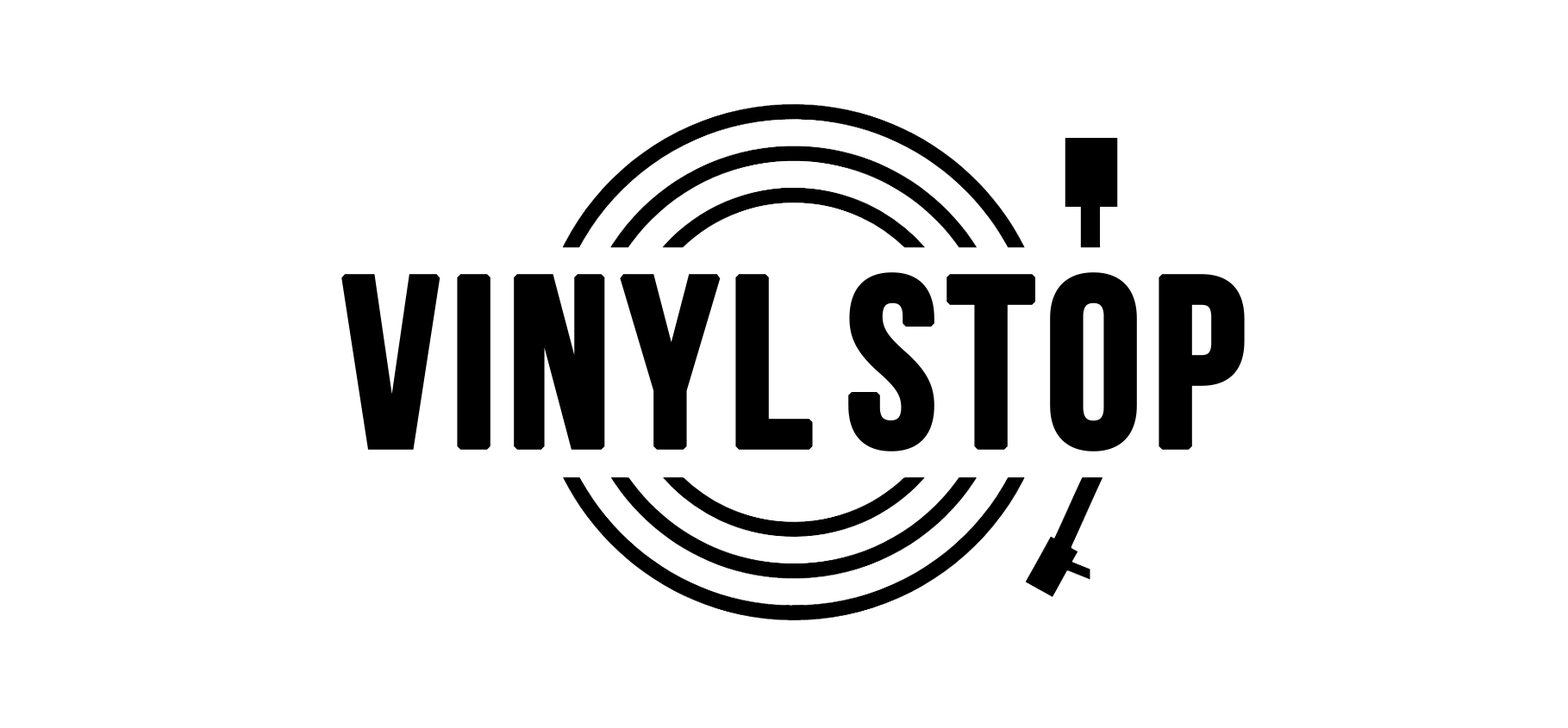
<style>
.page{position:relative;width:1568px;height:728px;background:#ffffff}
.page>*{position:absolute;margin:0}
.t1{font:241.4px "BebasNeue";letter-spacing:0.02em;color:#000000;font-weight:bold}
</style>
<div class="page">
<p class="t1" style="left:341px;top:272px;width:904px;height:180px">VINYLSTOP</p>
</div>
